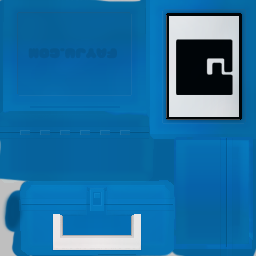
<style>
.page{position:relative;width:256px;height:256px}
.page>*{position:absolute;margin:0}
.t1{font:14px "CoppepanChocoAl";letter-spacing:-0.025em;color:#065791;font-weight:bold}
</style>
<div class="page">
<p class="t1" style="left:28px;top:48px;width:89px;height:11px;rotate:180deg">FAYJU.COM</p>
</div>
